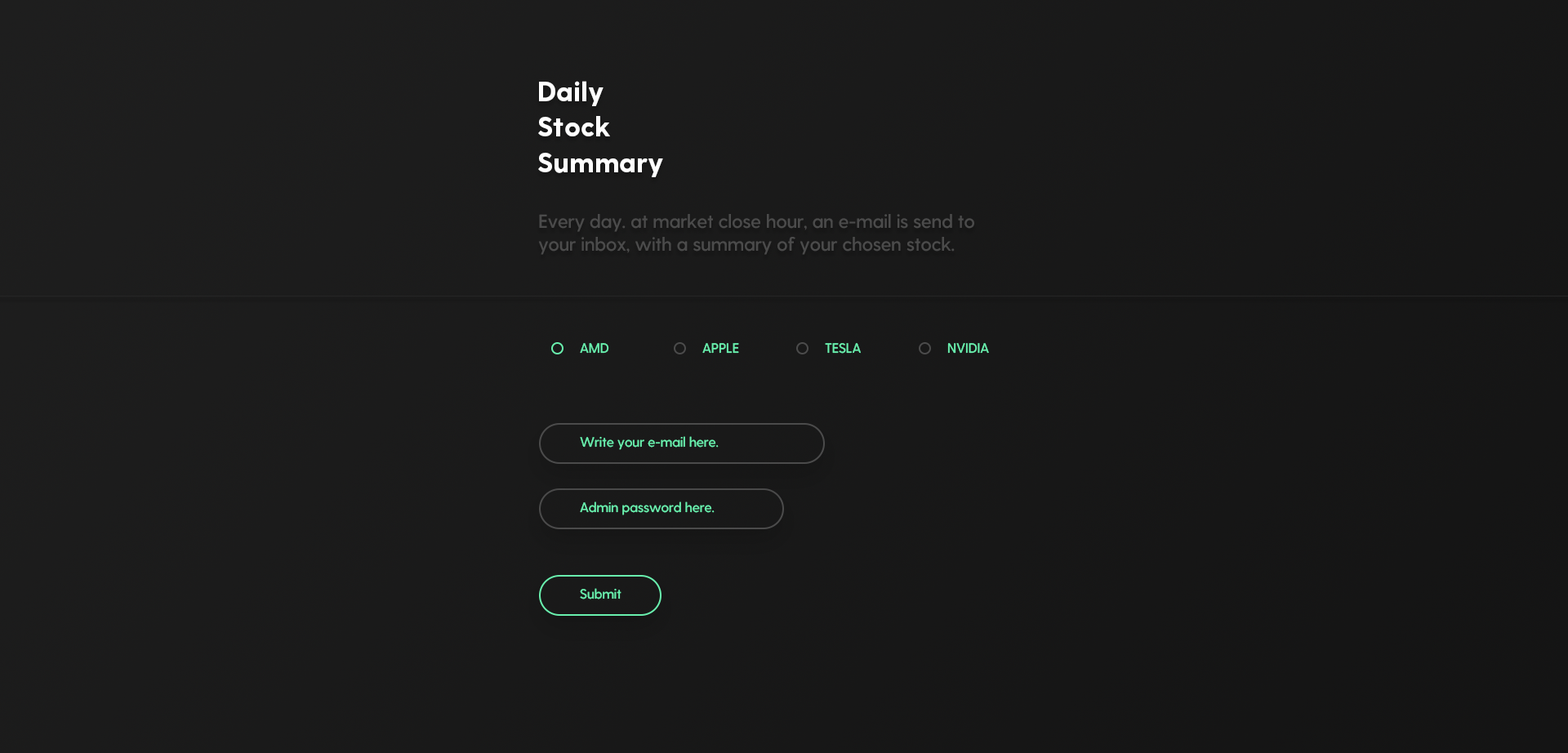
<style>
.page{position:relative;width:1568px;height:753px}
.page>*{position:absolute;margin:0}
.t1{font:27.2px/35.4px "GreycliffCF-ExtraBold";color:#ffffff}
.t2{font:19.1px "GreycliffCF-DemiBold";color:#4b4b4b}
.t3{font:13.6px "GreycliffCF-DemiBold";color:#69f0ae}
</style>
<div class="page">
<p class="t1" style="left:538px;top:81px;width:125px;height:96px">Daily<br>Stock<br>Summary</p>
<p class="t2" style="left:538px;top:214px;width:436px;height:41px">Every day. at market close hour, an e-mail is send to<br>your inbox, with a summary of your chosen stock.</p>
<p class="t3" style="left:580px;top:343px;width:29px;height:11px">AMD</p>
<p class="t3" style="left:702px;top:343px;width:37px;height:11px">APPLE</p>
<p class="t3" style="left:825px;top:343px;width:36px;height:11px">TESLA</p>
<p class="t3" style="left:947px;top:343px;width:42px;height:11px">NVIDIA</p>
<p class="t3" style="left:580px;top:436px;width:139px;height:14px">Write your e-mail here.</p>
<p class="t3" style="left:580px;top:501px;width:135px;height:14px">Admin password here.</p>
<p class="t3" style="left:580px;top:588px;width:41px;height:11px">Submit</p>
</div>
